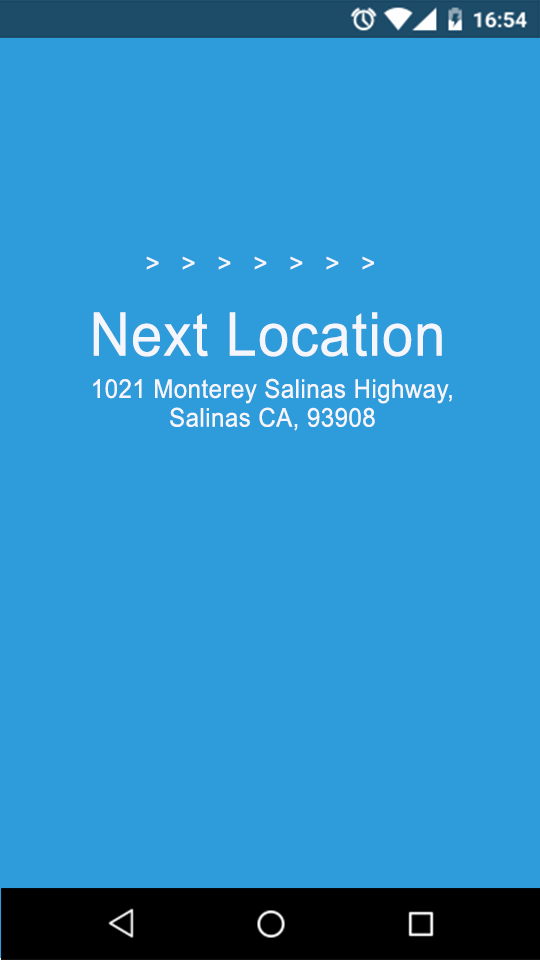
<style>
.page{position:relative;width:540px;height:960px;background:#2e9bda}
.page>*{position:absolute;margin:0}
.t1{font:25.9px "ArialMT";letter-spacing:0.02em;color:#f5f6fc;scale:0.93 1}
.t2{font:60.5px "ArialMT";letter-spacing:0.02em;color:#f5f6fc;scale:0.93 1}
</style>
<div class="page">
<p class="t1" style="left:146px;top:256px;width:228px;height:14px">&gt;   &gt;   &gt;   &gt;   &gt;   &gt;   &gt;</p>
<p class="t2" style="left:93px;top:312px;width:349px;height:45px">Next Location</p>
<p class="t1" style="left:93px;top:378px;width:359px;height:53px;text-align:center">1021 Monterey Salinas Highway,<br>Salinas CA, 93908</p>
</div>
